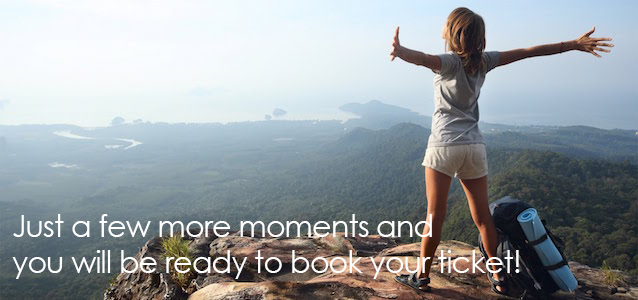
<style>
.page{position:relative;width:638px;height:300px}
.page>*{position:absolute;margin:0}
.t1{font:30px "CenturyGothic";letter-spacing:-0.025em;color:#ffffff}
</style>
<div class="page">
<p class="t1" style="left:12px;top:214px;width:508px;height:65px">Just a few more moments and<br>you will be ready to book your ticket!</p>
</div>
